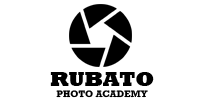
<style>
.page{position:relative;width:200px;height:100px;background:#ffffff}
.page>*{position:absolute;margin:0}
.t1{font:9.5px/21.4px "Rockwell-Bold";color:#000000}
.t2{font:21.4px/21.4px "Rockwell-ExtraBold";color:#000000}
</style>
<div class="page">
<p class="t1" style="left:50px;top:72px;width:104px;height:26px;text-align:center"><span class="t2">RUBATO<br></span>PHOTO ACADEMY</p>
</div>
